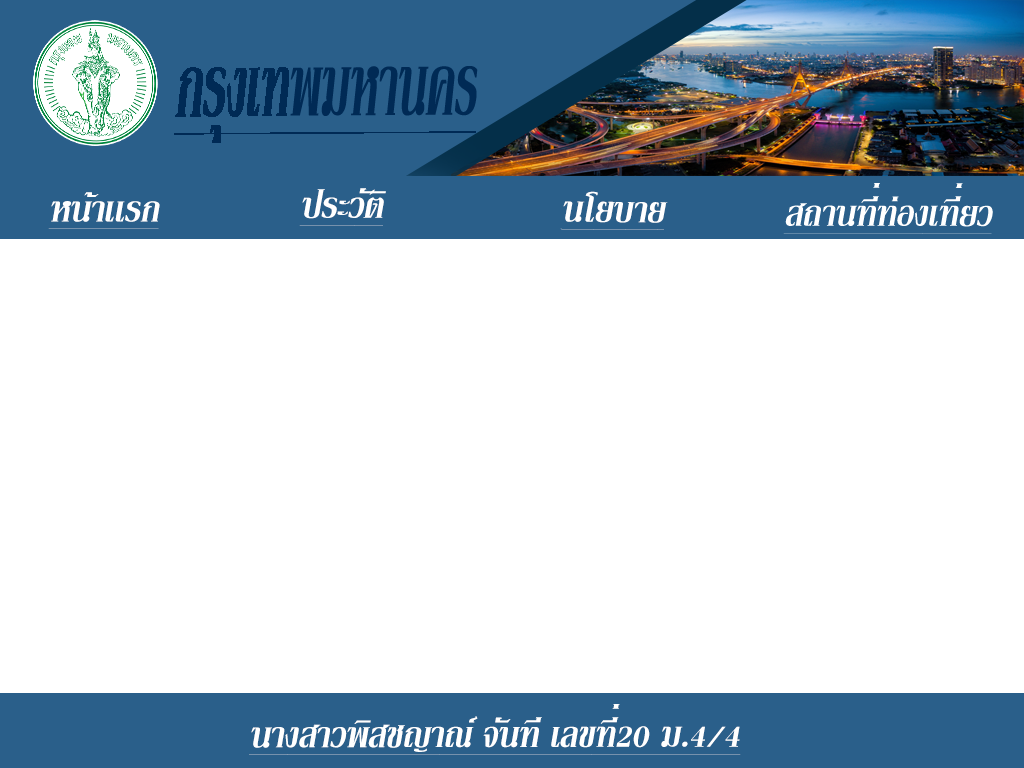
<style>
.page{position:relative;width:1024px;height:768px;background:#ffffff}
.page>*{position:absolute;margin:0}
.t1{font:50px "KodchiangUPCBold";color:#ffffff;font-style:italic;text-decoration:underline}
</style>
<div class="page">
<p class="t1" style="left:48px;top:192px;width:112px;height:37px">หน้าเเรก</p>
<p class="t1" style="left:299px;top:188px;width:87px;height:38px">ประวัติ</p>
<p class="t1" style="left:560px;top:191px;width:108px;height:39px">นโยบาย</p>
<p class="t1" style="left:249px;top:704px;width:492px;height:51px">นางสาวพิสชญาณ์ จันที เลขที่20 ม.4/4</p>
</div>
